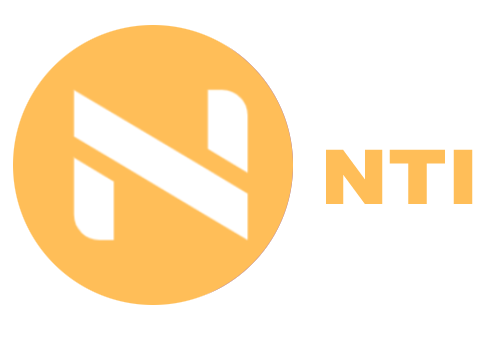
<style>
.page{position:relative;width:500px;height:364px;background:#ffffff}
.page>*{position:absolute;margin:0}
.t1{font:75.4px "Arial-Black";color:#ffbe58;scale:1.08 1}
</style>
<div class="page">
<p class="t1" style="left:326px;top:149px;width:147px;height:55px">NTI</p>
</div>
